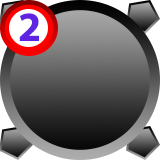
<style>
.page{position:relative;width:160px;height:160px}
.page>*{position:absolute;margin:0}
.t1{font:41.7px "MyriadPro-Bold";color:#5e24e2}
</style>
<div class="page">
<p class="t1" style="left:19px;top:13px;width:20px;height:28px">2</p>
</div>
